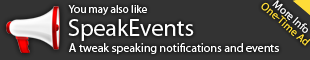
<style>
.page{position:relative;width:310px;height:60px;background:#333333}
.page>*{position:absolute;margin:0}
.t1{font:11px "MyriadPro-Regular";color:#fefefe}
.t2{font:11px/9px "MyriadPro-Regular";color:#ffdc36}
.t3{font:11px/9px "MyriadPro-Regular";color:#fefefe}
.t4{font:24px "MyriadPro-Regular";color:#fefefe}
.t5{font:12px "MyriadPro-Regular";color:#fefefe}
</style>
<div class="page">
<p class="t1" style="left:68px;top:5px;width:79px;height:10px">You may also like</p>
<p class="t2" style="left:261px;top:0px;width:50px;height:46px;text-align:center;rotate:41deg"><span class="t3">More Info<br></span>One-Time Ad</p>
<p class="t4" style="left:68px;top:19px;width:126px;height:22px">SpeakEvents</p>
<p class="t5" style="left:69px;top:43px;width:210px;height:11px">A tweak speaking notifications and events</p>
</div>
